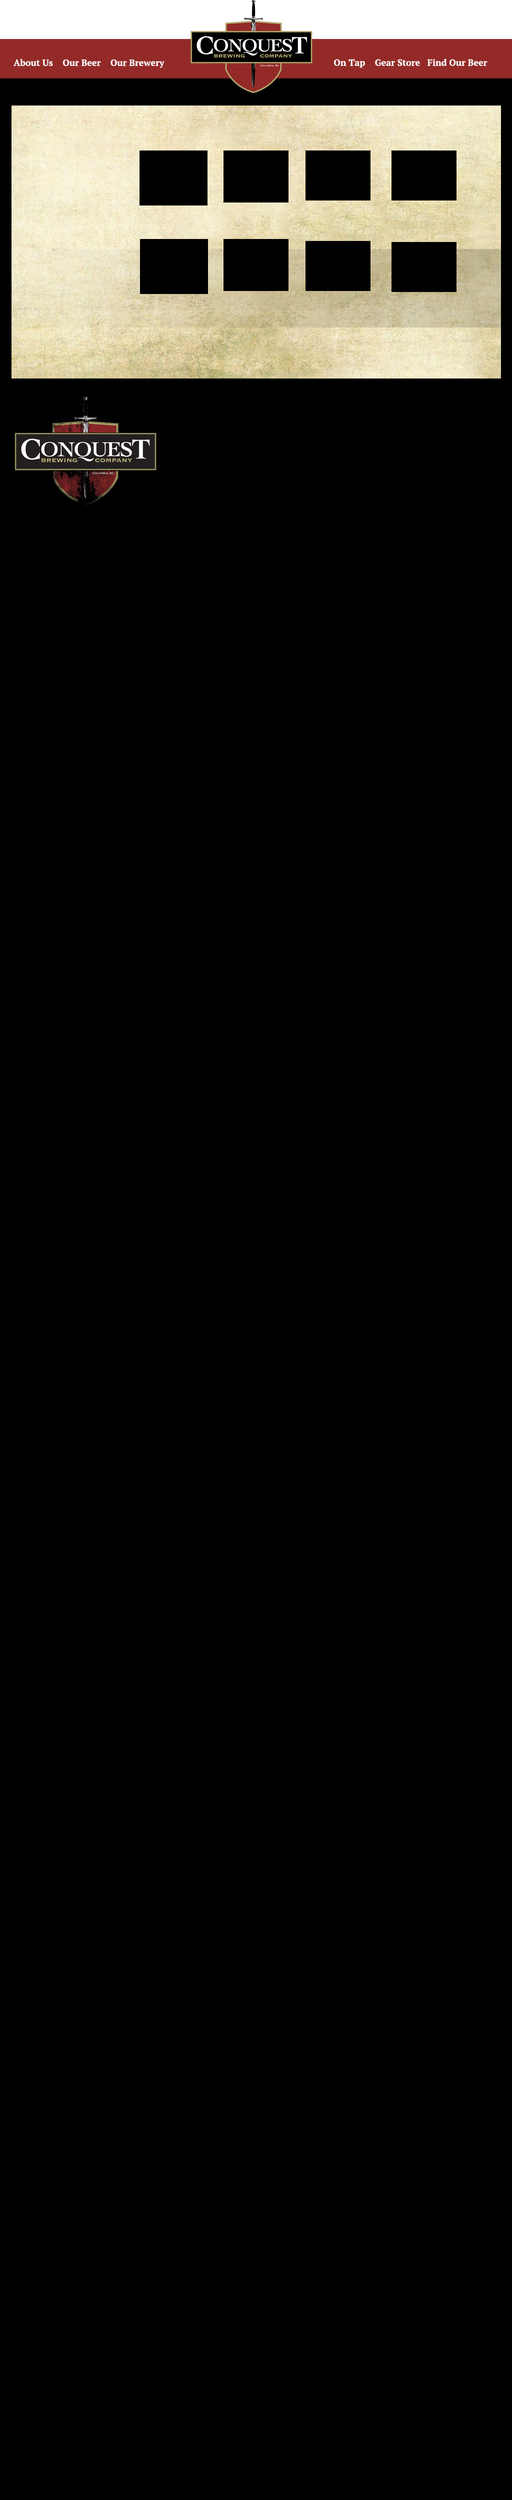
<style>
.page{position:relative;width:512px;height:2500px;background:#000000}
.page>*{position:absolute;margin:0}
.t1{font:9px "PTSerif-Bold";color:#fbf8f8}
</style>
<div class="page">
<p class="t1" style="left:14px;top:59px;width:150px;height:9px">About Us    Our Beer    Our Brewery</p>
<p class="t1" style="left:334px;top:58px;width:154px;height:10px">On Tap    Gear Store   Find Our Beer</p>
</div>
